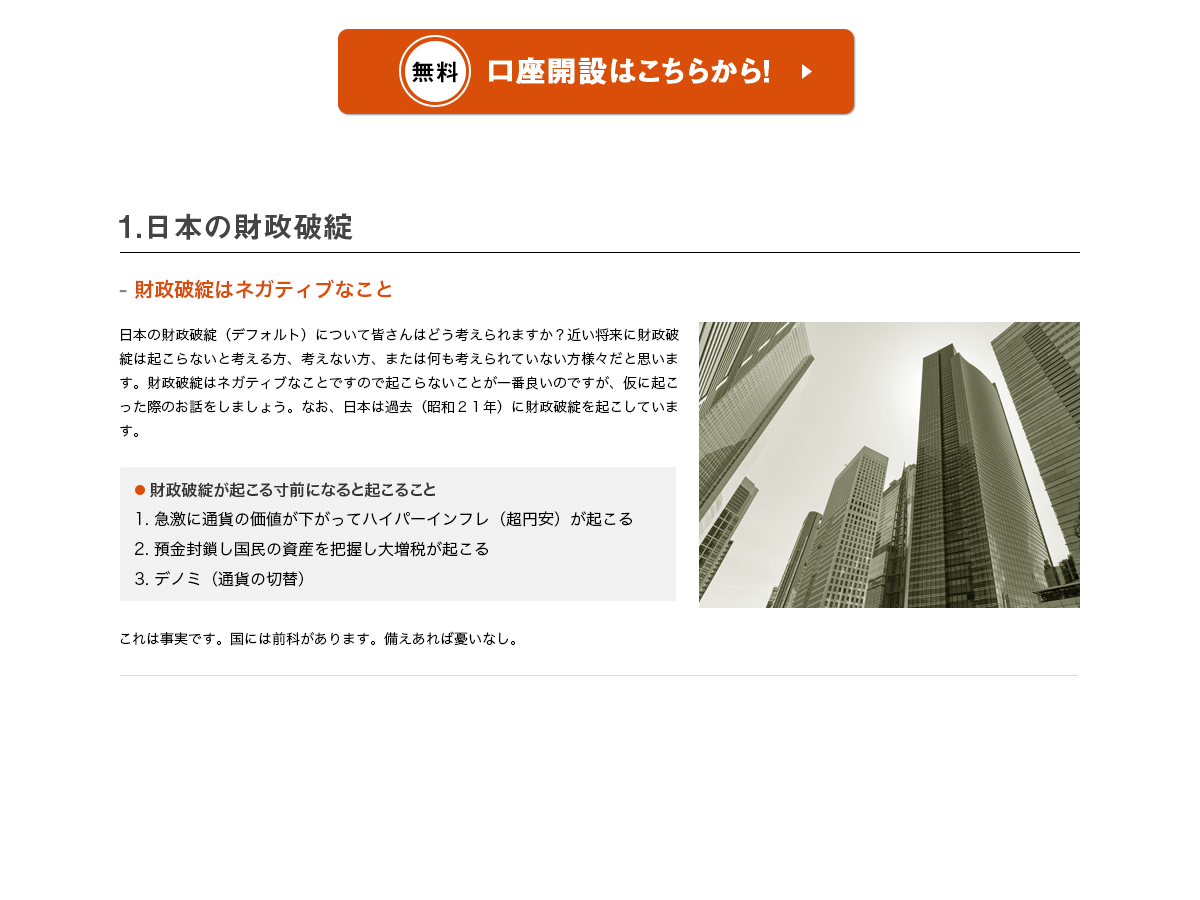
<style>
.page{position:relative;width:1200px;height:900px;background:#ffffff}
.page>*{position:absolute;margin:0}
.t1{font:24px "MidashiGoPro-MB31";color:#000000}
.t2{font:30px "MidashiGoPro-MB31";color:#ffffff;font-weight:bold}
.t3{font:16.5px "MidashiGoPro-MB31";color:#ffffff}
.t4{font:30px "MidashiGoPro-MB31";color:#444444}
.t5{font:20px "HiraKakuPro-W6";color:#d94e09}
.t6{font:20px "HiraKakuPro-W6";color:#888888}
.t7{font:14px/24px "HiraKakuPro-W3";color:#000000}
.t8{font:16px "HiraKakuProN-W6";color:#333333}
.t9{font:16px/30px "HiraKakuProN-W3";color:#000000}
.t10{font:14px "HiraKakuPro-W3";color:#000000}
</style>
<div class="page">
<p class="t1" style="left:412px;top:61px;width:46px;height:22px">無料</p>
<p class="t2" style="left:489px;top:57px;width:280px;height:28px">口座開設はこちらから！</p>
<p class="t3" style="left:802px;top:64px;width:10px;height:15px">▶︎</p>
<p class="t4" style="left:119px;top:213px;width:234px;height:27px">1.日本の財政破綻</p>
<p class="t5" style="left:119px;top:279px;width:273px;height:20px"><span class="t6">-</span> 財政破綻はネガティブなこと</p>
<p class="t7" style="left:119px;top:327px;width:560px;height:110px">日本の財政破綻（デフォルト）について皆さんはどう考えられますか？近い将来に財政破綻は起こらないと考える方、考えない方、または何も考えられていない方様々だと思います。財政破綻はネガティブなことですので起こらないことが一番良いのですが、仮に起こった際のお話をしましょう。なお、日本は過去（昭和２１年）に財政破綻を起こしています。<br><br><br><br><br><br><br><br><br><br><br><br><br>これが起こると国民は資産の大半を失うことになります。</p>
<p class="t8" style="left:150px;top:482px;width:285px;height:16px">財政破綻が起こる寸前になると起こること</p>
<p class="t9" style="left:135px;top:511px;width:497px;height:76px">1. 急激に通貨の価値が下がってハイパーインフレ（超円安）が起こる<br>2. 預金封鎖し国民の資産を把握し大増税が起こる<br>3. デノミ（通貨の切替）</p>
<p class="t10" style="left:120px;top:631px;width:395px;height:15px">これは事実です。国には前科があります。備えあれば憂いなし。</p>
</div>
